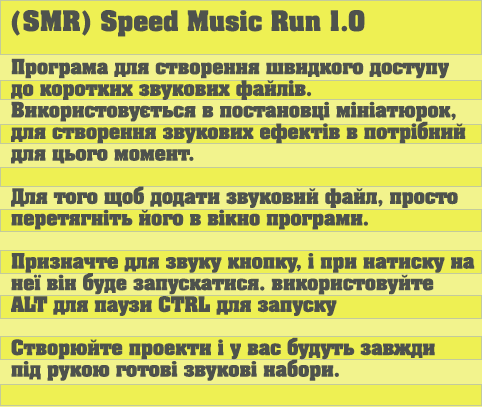
<style>
.page{position:relative;width:482px;height:407px;background:#eef053}
.page>*{position:absolute;margin:0}
.t1{font:18px "AGAalenBold-Roman";color:#4e524d}
.t2{font:24px "AGAalenBold-Roman";color:#4e524d}
</style>
<div class="page">
<p class="t1" style="left:11px;top:10px;width:464px;height:371px"><span class="t2">(SMR) Speed Music Run 1.0<br></span><br>Програма для створення швидкого доступу<br>до коротких звукових файлів.<br>Використовується в постановці мініатюрок,<br>для створення звукових ефектів в потрібний <br>для цього момент.<br><br>Для того щоб додати звуковий файл, просто<br>перетягніть його в вікно програми.<br><br>Призначте для звуку кнопку, і при натиску на<br>неї він буде запускатися. використовуйте <br>ALT для паузи CTRL для запуску<br><br>Створюйте проекти і у вас будуть завжди<br>під рукою готові звукові набори.</p>
</div>
